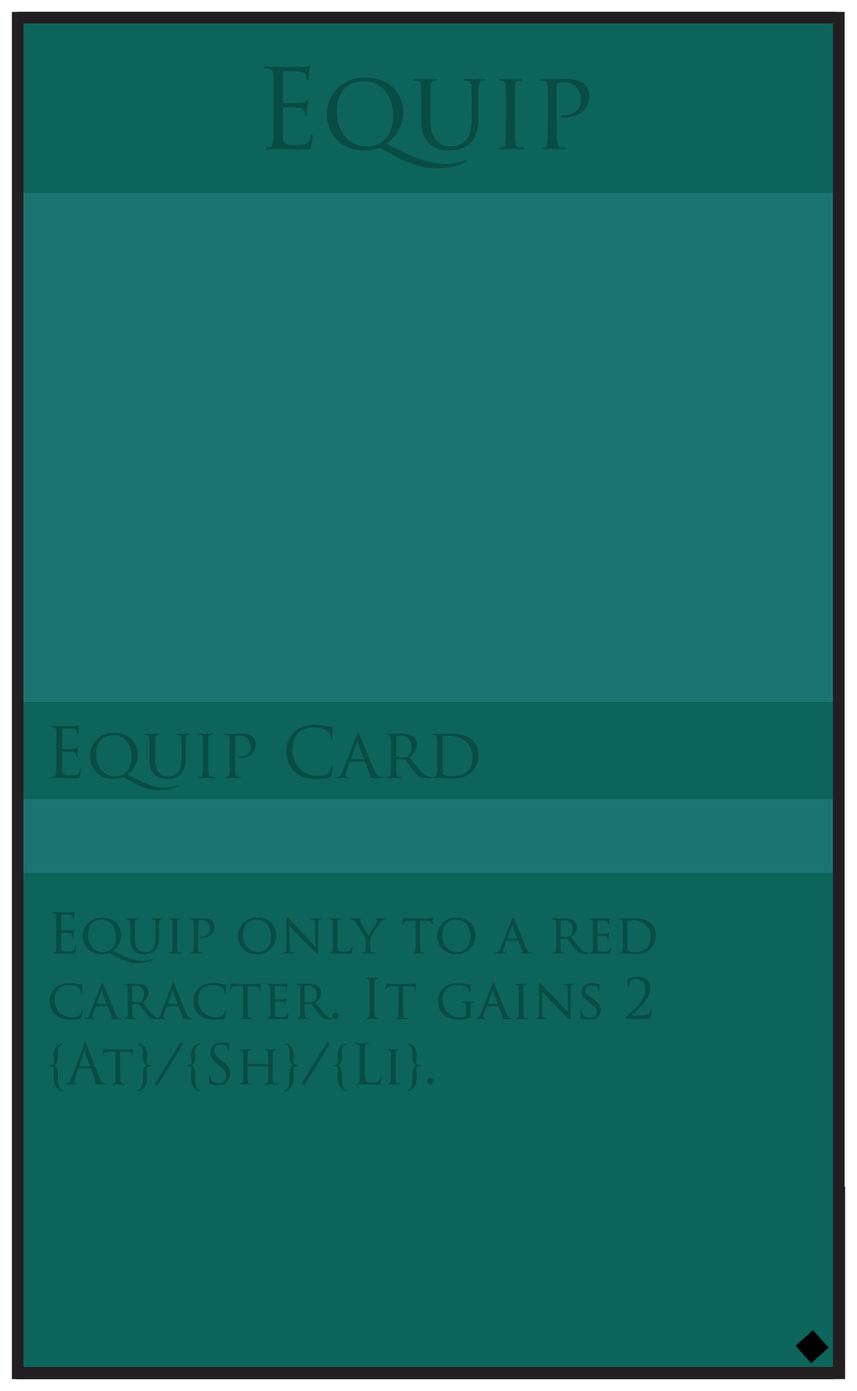
<style>
.page{position:relative;width:857px;height:1391px;background:#0d645a}
.page>*{position:absolute;margin:0}
.t1{font:109.1px "TrajanPro-Regular";color:#084c44}
.t2{font:68.9px "TrajanPro-Regular";color:#084c44}
.t3{font:54.5px "TrajanPro-Regular";color:#084c44}
</style>
<div class="page">
<p class="t1" style="left:264px;top:65px;width:326px;height:104px">Equip</p>
<p class="t2" style="left:50px;top:725px;width:429px;height:65px">Equip Card</p>
<p class="t3" style="left:50px;top:912px;width:606px;height:179px">Equip only to a red <br>caracter. It gains 2 <br>{At}/{Sh}/{Li}.</p>
</div>
